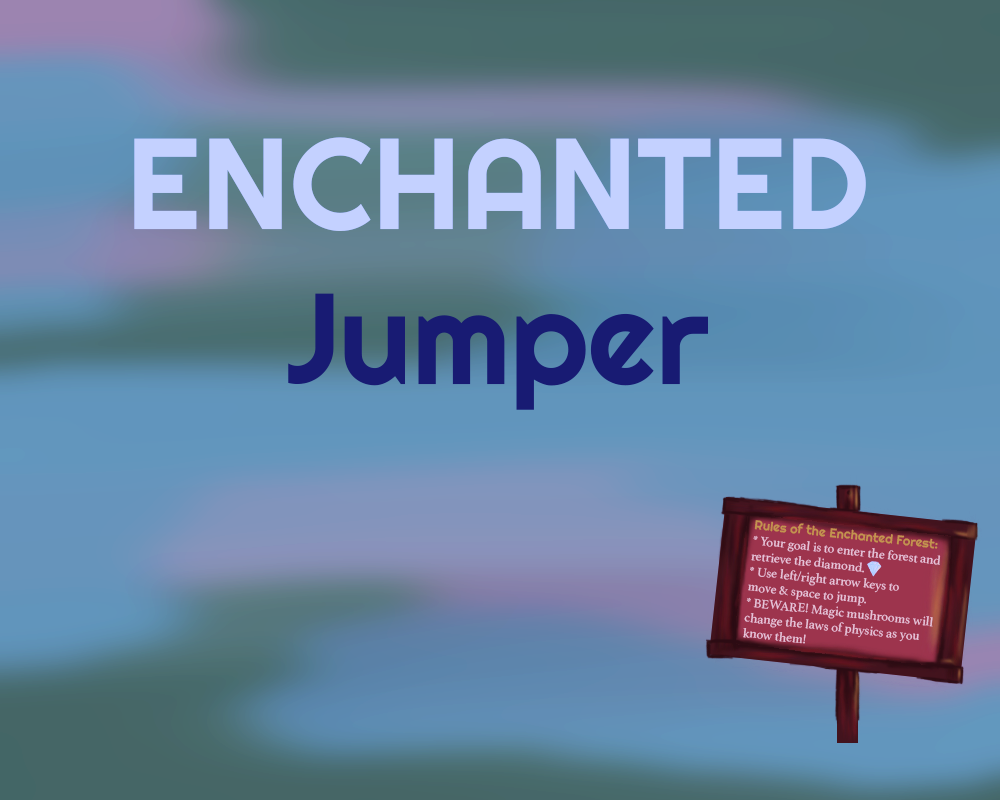
<style>
.page{position:relative;width:1000px;height:800px}
.page>*{position:absolute;margin:0}
.t1{font:128.8px "Righteous-Regular"}
.t2{font:12.9px "Athelas-Regular"}
.t3{font:12.9px "Righteous-Regular"}
</style>
<div class="page">
<p class="t1" style="left:134px;top:137px;width:732px;height:273px;text-align:center">ENCHANTED<br>Jumper</p>
<p class="t2" style="left:743px;top:520px;width:198px;height:124px;rotate:6deg"><span class="t3">Rules of the Enchanted Forest:<br></span>* Your goal is to enter the forest and <br>retrieve the diamond.<br>* Use left/right arrow keys to <br>move &amp; space to jump.<br>* BEWARE! Magic mushrooms will<br>change the laws of physics as you<br>know them!</p>
</div>
